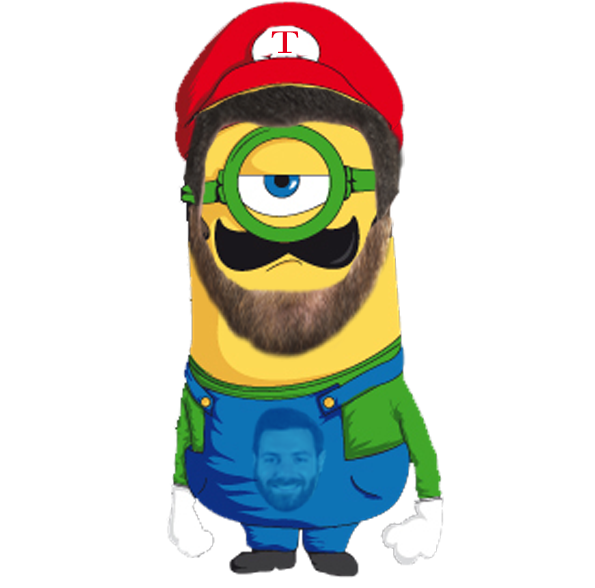
<style>
.page{position:relative;width:595px;height:588px;background:#ffffff}
.page>*{position:absolute;margin:0}
.t1{font:30.5px "JavaneseText";letter-spacing:0.075em;color:#e3001b;scale:1.47 1}
</style>
<div class="page">
<p class="t1" style="left:271px;top:31px;width:28px;height:22px">T</p>
</div>
